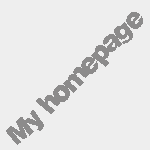
<style>
.page{position:relative;width:150px;height:150px;background:#eeeeee}
.page>*{position:absolute;margin:0}
.t1{font:26.6px "Soopafresh";color:#8c8b8b}
</style>
<div class="page">
<p class="t1" style="left:6px;top:12px;width:137px;height:133px;rotate:-45deg">My homepage</p>
</div>
